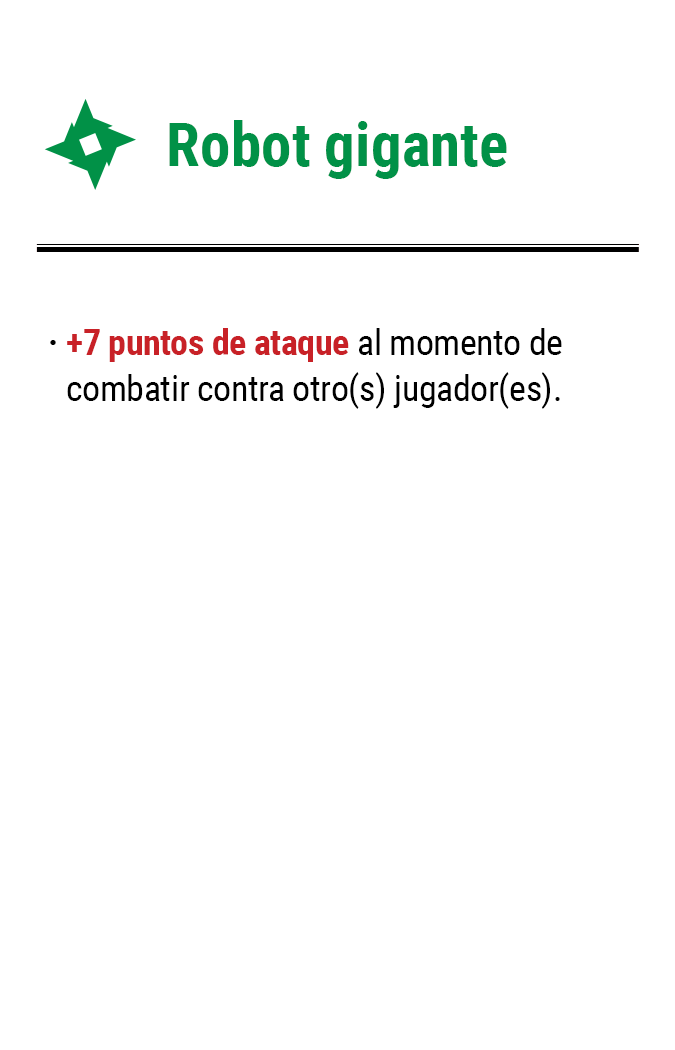
<style>
.page{position:relative;width:675px;height:1050px;background:#ffffff}
.page>*{position:absolute;margin:0}
.t1{font:61.2px "RobotoCondensed-Bold";color:#019147}
.t2{font:35.8px/45.8px "RobotoCondensed-Regular";letter-spacing:-0.01em;color:#000000}
.t3{font:35.8px/45.8px "RobotoCondensed-Bold";letter-spacing:-0.01em;color:#c82127}
.t4{font:35.8px "RobotoCondensed-Bold";letter-spacing:-0.01em;color:#000000}
</style>
<div class="page">
<p class="t1" style="left:169px;top:120px;width:338px;height:59px">Robot gigante</p>
<p class="t2" style="left:67px;top:328px;width:495px;height:81px"><span class="t3">+7 puntos de ataque</span> al momento de combatir contra otro(s) jugador(es).</p>
<p class="t4" style="left:50px;top:340px;width:6px;height:5px">·</p>
</div>
